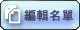
<style>
.page{position:relative;width:80px;height:30px}
.page>*{position:absolute;margin:0}
.t1{font:12px "DFHei-Bd-HK-BF";letter-spacing:0.05em;color:#424363}
</style>
<div class="page">
<p class="t1" style="left:24px;top:9px;width:49px;height:12px">編輯名單</p>
</div>
